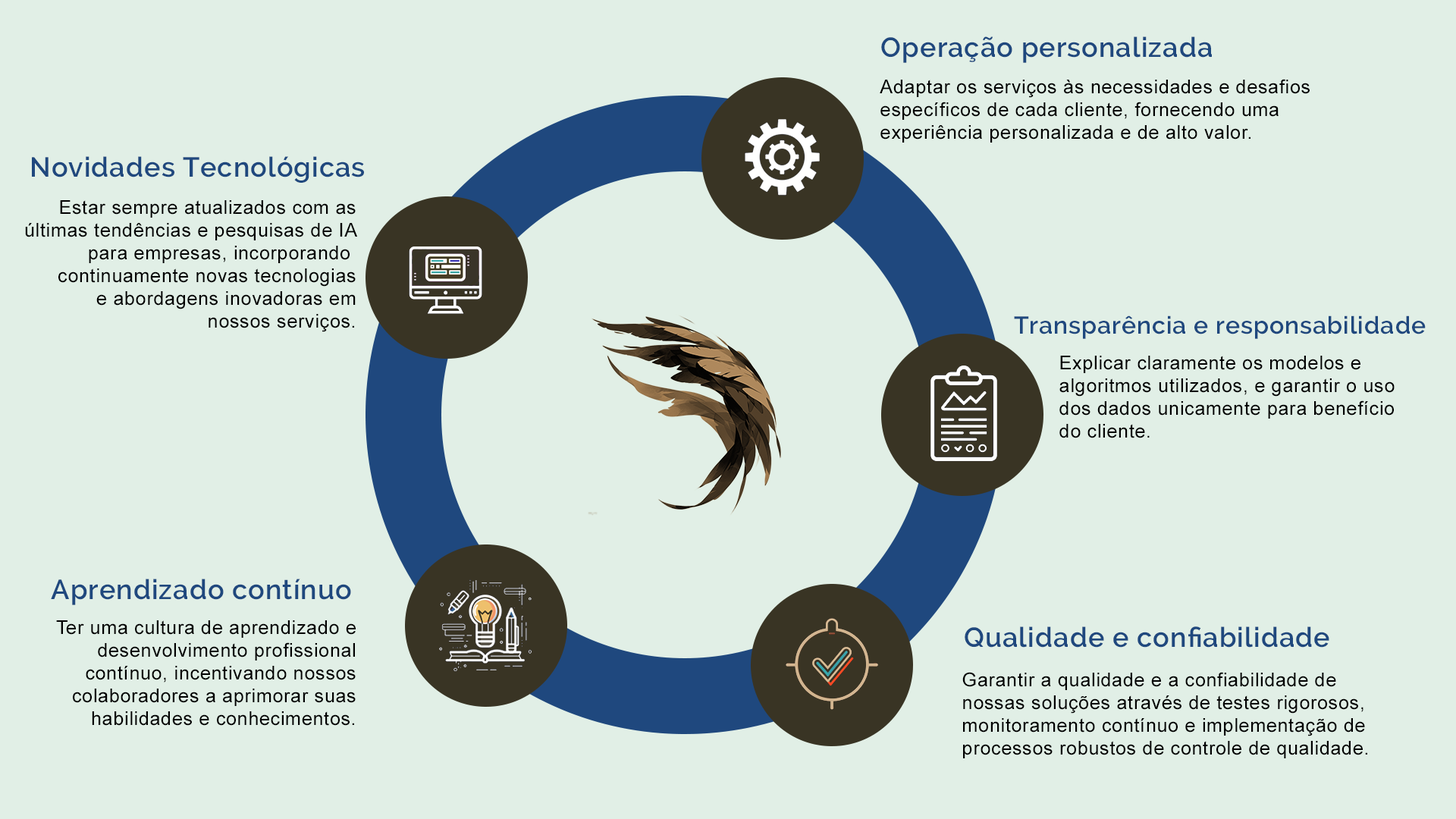
<style>
.page{position:relative;width:1456px;height:819px;background:#e1efe6}
.page>*{position:absolute;margin:0}
.t1{font:27.3px "Raleway-SemiBold";letter-spacing:0.03em;color:#1f487e}
.t2{font:19px "ArialMT";letter-spacing:0.03em;color:#000000}
.t3{font:24.3px "Raleway-SemiBold";letter-spacing:0.03em;color:#1f487e}
</style>
<div class="page">
<p class="t1" style="left:881px;top:36px;width:331px;height:27px">Operação personalizada</p>
<p class="t2" style="left:880px;top:79px;width:430px;height:64px">Adaptar os serviços às necessidades e desafios<br>específicos de cada cliente, fornecendo uma<br>experiência personalizada e de alto valor.</p>
<p class="t1" style="left:32px;top:156px;width:332px;height:27px">Novidades Tecnológicas</p>
<p class="t2" style="left:25px;top:200px;width:332px;height:132px;text-align:right">Estar sempre atualizados com as<br>últimas tendências e pesquisas de IA<br>para empresas, incorporando <br>continuamente novas tecnologias<br>e abordagens inovadoras em<br>nossos serviços.</p>
<p class="t3" style="left:1014px;top:315px;width:412px;height:24px">Transparência e responsabilidade</p>
<p class="t2" style="left:1059px;top:356px;width:336px;height:82px">Explicar claramente os modelos e<br>algoritmos utilizados, e garantir o uso<br>dos dados unicamente para benefício<br>do cliente.</p>
<p class="t1" style="left:51px;top:579px;width:300px;height:26px">Aprendizado contínuo</p>
<p class="t2" style="left:56px;top:620px;width:300px;height:106px;text-align:right">Ter uma cultura de aprendizado e<br>desenvolvimento profissional<br>contínuo, incentivando nossos<br>colaboradores a aprimorar suas<br>habilidades e conhecimentos.</p>
<p class="t1" style="left:965px;top:626px;width:364px;height:22px">Qualidade e confiabilidade</p>
<p class="t2" style="left:962px;top:672px;width:405px;height:86px">Garantir a qualidade e a confiabilidade de<br>nossas soluções através de testes rigorosos,<br>monitoramento contínuo e implementação de<br>processos robustos de controle de qualidade.</p>
</div>
